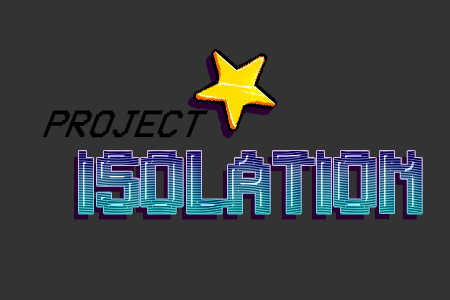
<style>
.page{position:relative;width:450px;height:300px;background:#333333}
.page>*{position:absolute;margin:0}
.t1{font:41.7px "VCROSDMono";color:#000000;scale:0.93 1}
.t2{font:62.5px "H-Terminal"}
</style>
<div class="page">
<p class="t1" style="left:42px;top:110px;width:166px;height:28px">PROJECT</p>
<p class="t2" style="left:79px;top:151px;width:343px;height:63px">ISOLATION</p>
</div>
